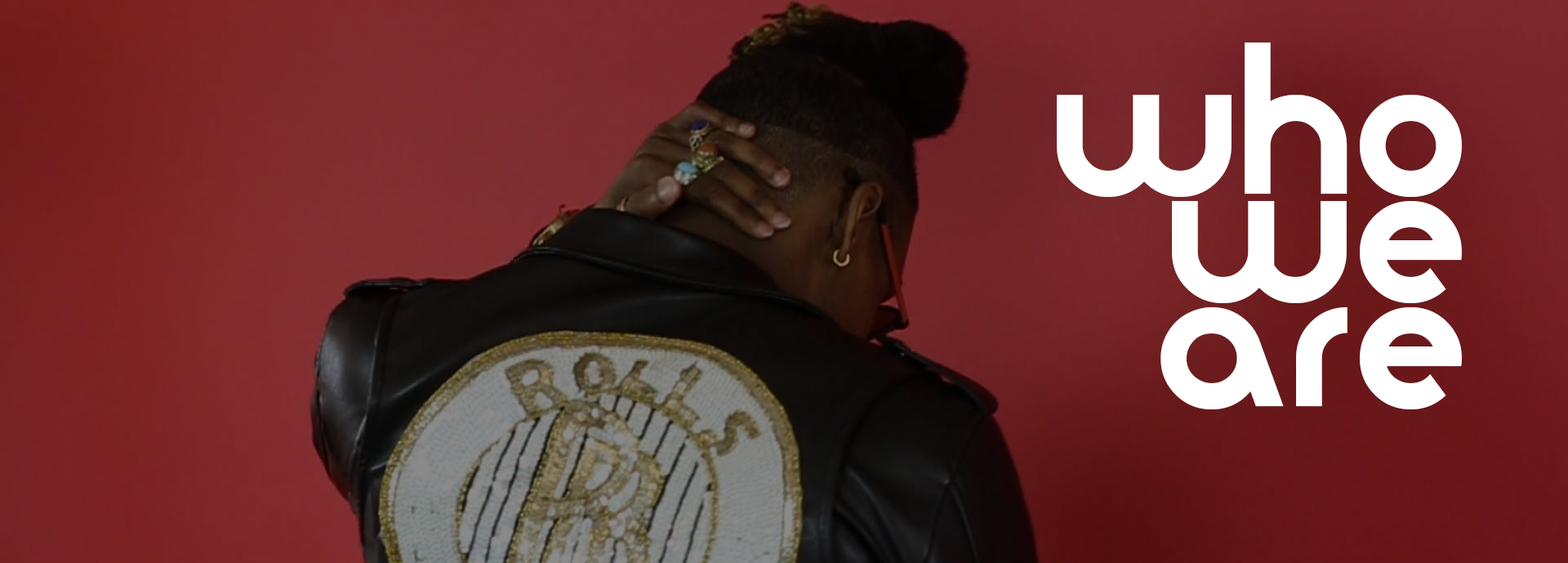
<style>
.page{position:relative;width:1568px;height:563px}
.page>*{position:absolute;margin:0}
.t1{font:190.6px/106.2px "Moderna";color:#ffffff}
</style>
<div class="page">
<p class="t1" style="left:1057px;top:42px;width:405px;height:367px;text-align:right">who<br>we<br>are</p>
</div>
